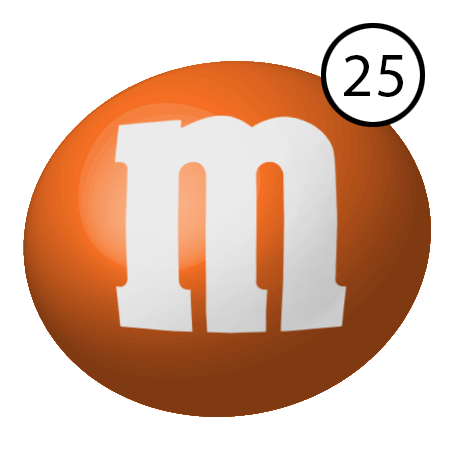
<style>
.page{position:relative;width:451px;height:451px;background:#ffffff}
.page>*{position:absolute;margin:0}
.t1{font:62.5px "MyriadPro-Regular";letter-spacing:0.02em;color:#000000}
</style>
<div class="page">
<p class="t1" style="left:344px;top:55px;width:59px;height:42px">25</p>
</div>
